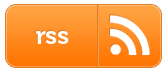
<style>
.page{position:relative;width:167px;height:72px;background:#ffffff}
.page>*{position:absolute;margin:0}
.t1{font:25px "Museo-700"}
.t2{font:25px "Museo-700";color:#ffffff}
</style>
<div class="page">
<p class="t1" style="left:35px;top:30px;width:33px;height:13px">rss</p>
<p class="t2" style="left:36px;top:31px;width:33px;height:13px">rss</p>
</div>
